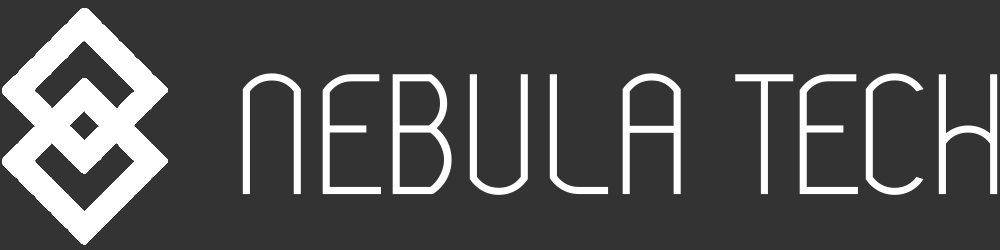
<style>
.page{position:relative;width:1000px;height:250px;background:#333333}
.page>*{position:absolute;margin:0}
.t1{font:170.9px "Modeka";color:#ffffff}
</style>
<div class="page">
<p class="t1" style="left:242px;top:73px;width:756px;height:122px">NEBULA TECH</p>
</div>
